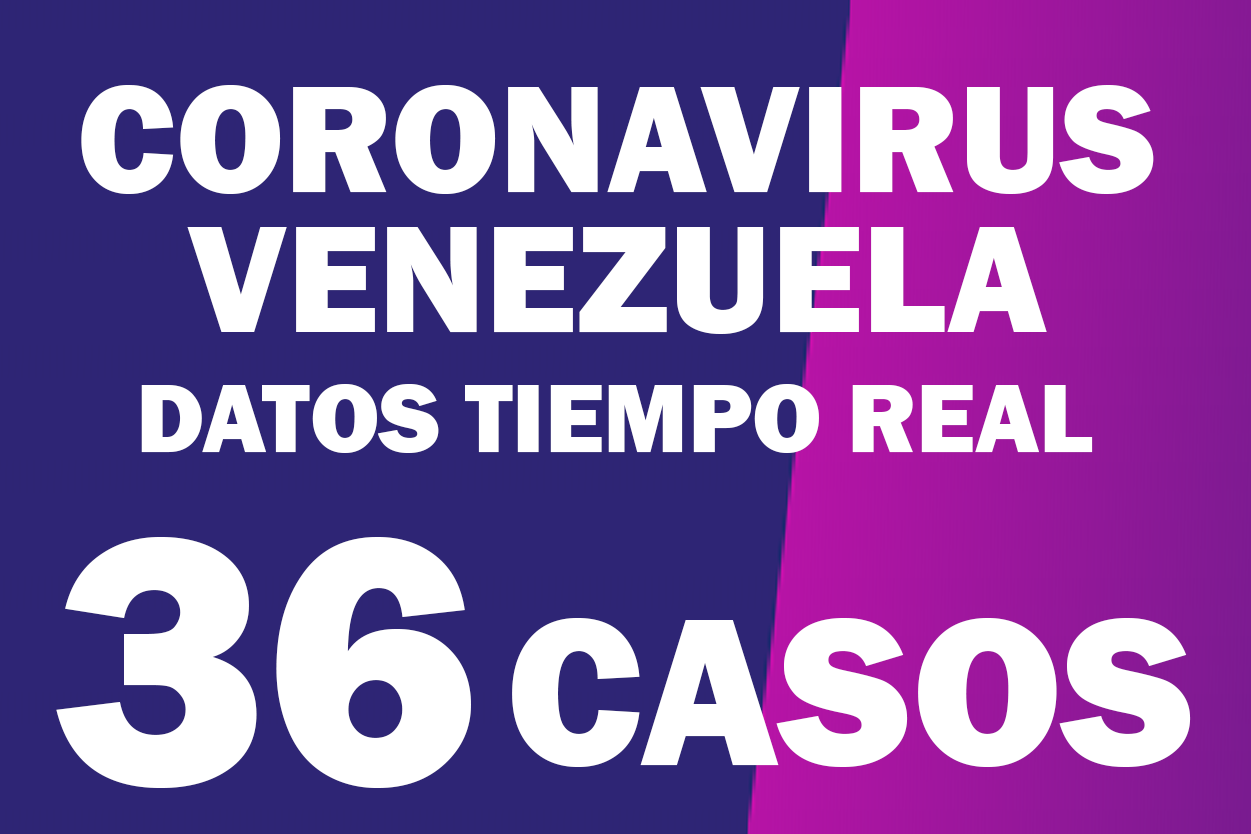
<style>
.page{position:relative;width:1251px;height:834px;background:#2e2575}
.page>*{position:absolute;margin:0}
.t1{font:156.8px/140px "FranklinGothic-Heavy";color:#ffffff}
.t2{font:100.5px "FranklinGothic-Heavy";color:#ffffff}
.t3{font:365px "FranklinGothic-Heavy";color:#ffffff}
.t4{font:217.9px "FranklinGothic-Heavy";color:#ffffff}
</style>
<div class="page">
<p class="t1" style="left:81px;top:85px;width:1073px;height:249px;text-align:center">CORONAVIRUS<br>VENEZUELA</p>
<p class="t2" style="left:141px;top:384px;width:952px;height:69px">DATOS TIEMPO REAL</p>
<p class="t3" style="left:56px;top:537px;width:415px;height:251px">36</p>
<p class="t4" style="left:512px;top:618px;width:679px;height:149px">CASOS</p>
</div>
